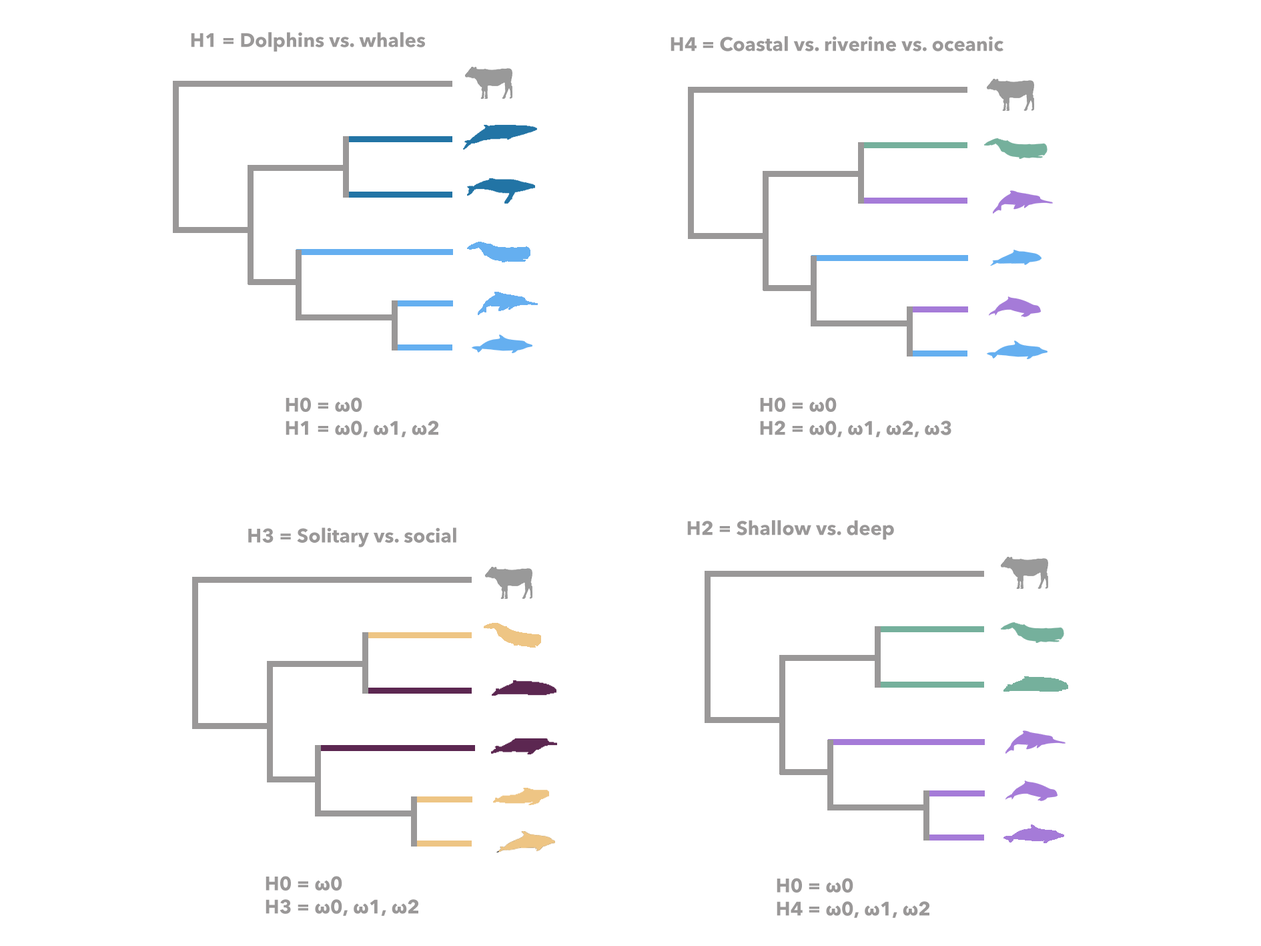
<style>
.page{position:relative;width:1261px;height:946px;background:#ffffff}
.page>*{position:absolute;margin:0}
.t1{font:19.4px "AvenirNext-Bold";color:#9a9898}
</style>
<div class="page">
<p class="t1" style="left:191px;top:32px;width:235px;height:20px">H1 = Dolphins vs. whales</p>
<p class="t1" style="left:671px;top:36px;width:333px;height:15px">H4 = Coastal vs. riverine vs. oceanic</p>
<p class="t1" style="left:286px;top:397px;width:152px;height:40px">H0 = ω0<br>H1 = ω0, ω1, ω2</p>
<p class="t1" style="left:760px;top:397px;width:192px;height:40px">H0 = ω0<br>H2 = ω0, ω1, ω2, ω3</p>
<p class="t1" style="left:687px;top:520px;width:207px;height:20px">H2 = Shallow vs. deep</p>
<p class="t1" style="left:248px;top:527px;width:208px;height:20px">H3 = Solitary vs. social</p>
<p class="t1" style="left:266px;top:875px;width:152px;height:40px">H0 = ω0<br>H3 = ω0, ω1, ω2</p>
<p class="t1" style="left:777px;top:877px;width:153px;height:40px">H0 = ω0<br>H4 = ω0, ω1, ω2</p>
</div>
